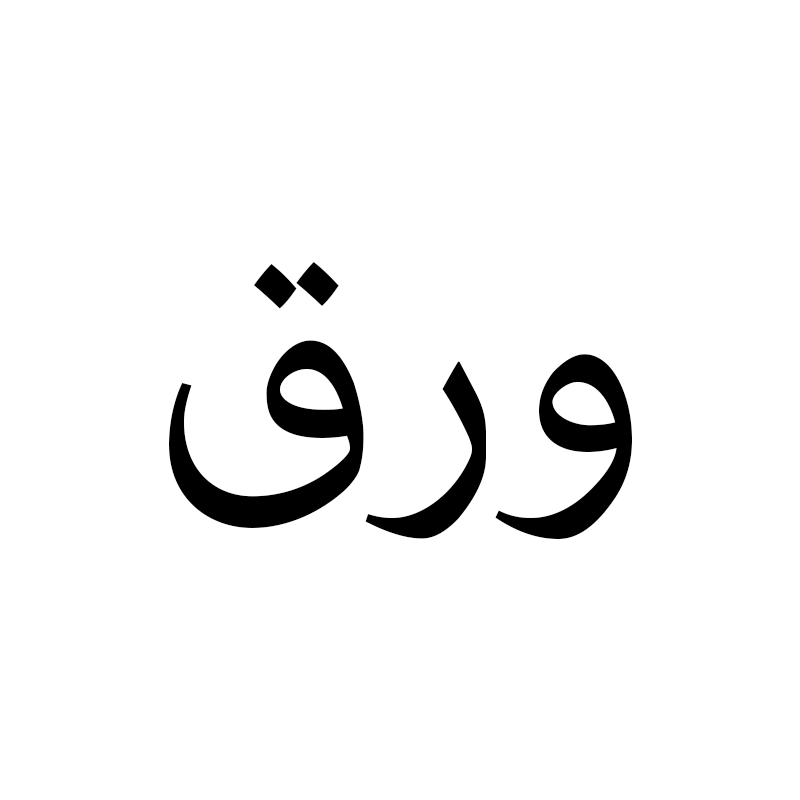
<style>
.page{position:relative;width:800px;height:800px;background:#ffffff}
.page>*{position:absolute;margin:0}
.t1{font:450px "AdobeArabic-Regular";color:#000000}
</style>
<div class="page">
<p class="t1" style="left:169px;top:262px;width:463px;height:277px">ورق</p>
</div>
